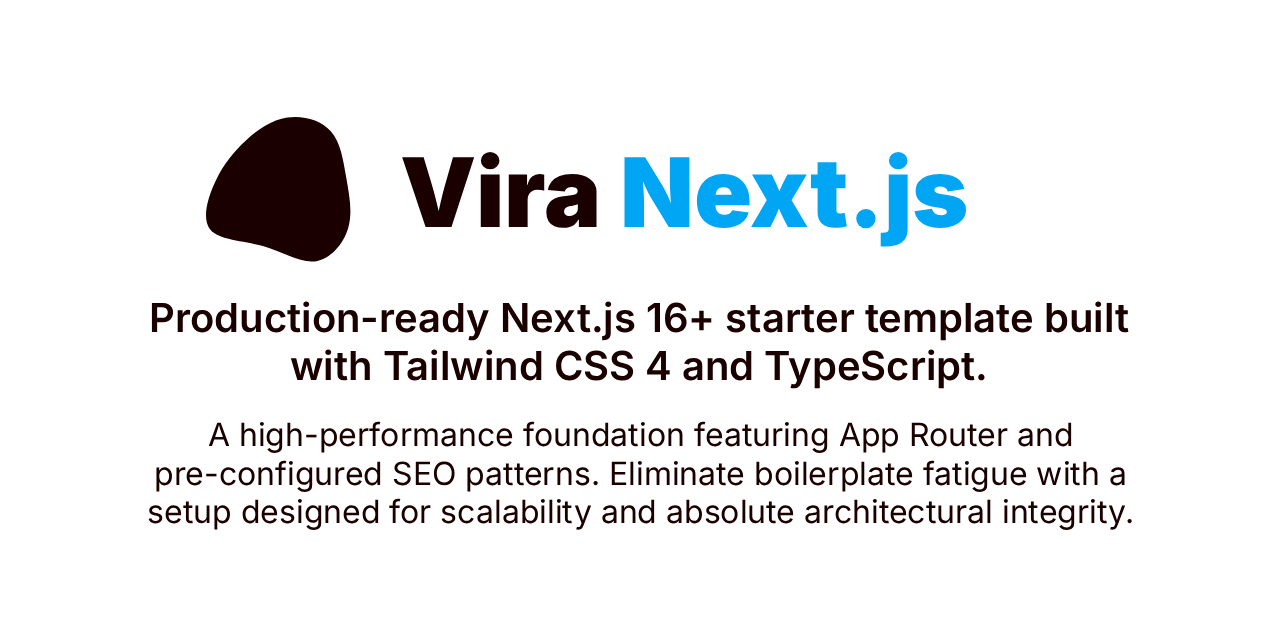
<style>
.page{position:relative;width:1280px;height:640px;background:#ffffff}
.page>*{position:absolute;margin:0}
.t1{font:96px "Inter-Black";color:#00a6f4}
.t2{font:96px "Inter-Black";color:#1b0000}
.t3{font:40px "Inter-SemiBold";color:#1b0000}
.t4{font:32px "Inter-Regular";color:#1b0000}
</style>
<div class="page">
<p class="t1" style="left:402px;top:152px;width:564px;height:95px"><span class="t2">Vira </span>Next.js</p>
<p class="t3" style="left:151px;top:301px;width:978px;height:88px;text-align:center">Production-ready Next.js 16+ starter template built with Tailwind CSS 4 and TypeScript.</p>
<p class="t4" style="left:148px;top:421px;width:984px;height:109px;text-align:center">A high-performance foundation featuring App Router and pre-configured SEO patterns. Eliminate boilerplate fatigue with a setup designed for scalability and absolute architectural integrity.</p>
</div>
